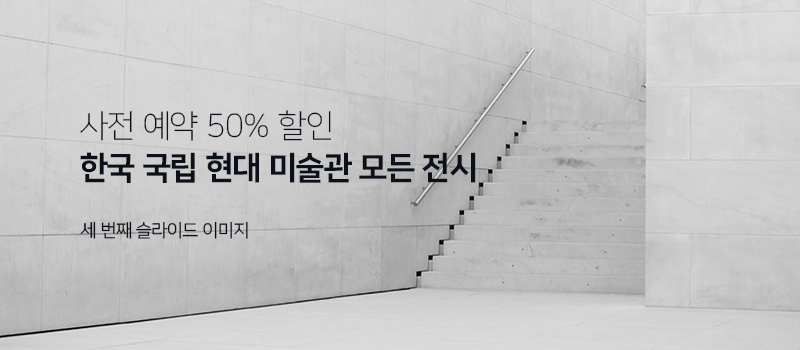
<style>
.page{position:relative;width:800px;height:350px}
.page>*{position:absolute;margin:0}
.t1{font:32px "NanumSquare_acL";color:#0c101a}
.t2{font:32px "NanumSquare_acEB";color:#0c101a}
.t3{font:18px "NanumSquare_acR";color:#0c101a}
</style>
<div class="page">
<p class="t1" style="left:80px;top:110px;width:251px;height:31px">사전 예약 50% 할인</p>
<p class="t2" style="left:80px;top:152px;width:396px;height:31px">한국 국립 현대 미술관 모든 전시</p>
<p class="t3" style="left:80px;top:221px;width:168px;height:18px">세 번째 슬라이드 이미지</p>
</div>
